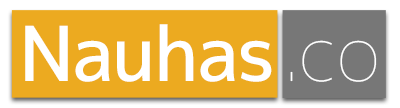
<style>
.page{position:relative;width:400px;height:108px;background:#ecaa20}
.page>*{position:absolute;margin:0}
.t1{font:75.7px "mplus-2p-medium";letter-spacing:-0.02em;color:#ffffff}
.t2{font:75.7px "mplus-2p-thin";color:#ffffff}
</style>
<div class="page">
<p class="t1" style="left:25px;top:24px;width:247px;height:58px">Nauhas</p>
<p class="t2" style="left:290px;top:40px;width:87px;height:42px">.co</p>
</div>
